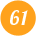
<style>
.page{position:relative;width:36px;height:36px;background:#ffa21c}
.page>*{position:absolute;margin:0}
.t1{font:20px "Lobster1.4";letter-spacing:0.1em;color:#ffffff}
</style>
<div class="page">
<p class="t1" style="left:10px;top:10px;width:18px;height:15px">61</p>
</div>
